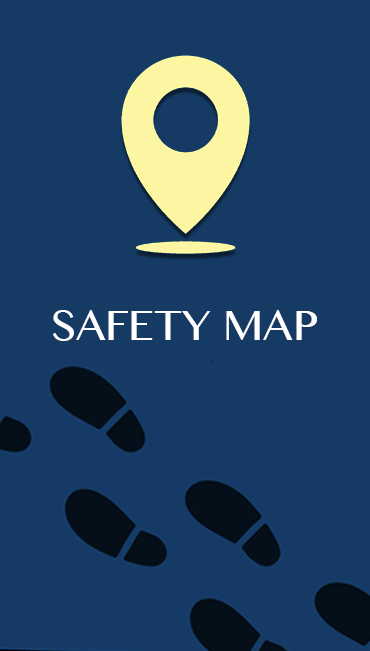
<style>
.page{position:relative;width:370px;height:651px;background:#153a65}
.page>*{position:absolute;margin:0}
.t1{font:48px "KannadaMN";color:#ffffff}
</style>
<div class="page">
<p class="t1" style="left:53px;top:310px;width:264px;height:31px">SAFETY MAP</p>
</div>
